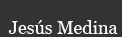
<style>
.page{position:relative;width:122px;height:37px;background:#333333}
.page>*{position:absolute;margin:0}
.t1{font:18px "Georgia";color:#fefefe}
</style>
<div class="page">
<p class="t1" style="left:8px;top:20px;width:110px;height:14px">Jesús Medina</p>
</div>
